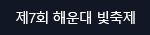
<style>
.page{position:relative;width:150px;height:35px;background:#111725}
.page>*{position:absolute;margin:0}
.t1{font:14px "MalgunGothic";letter-spacing:-0.06em;color:#ffffff}
</style>
<div class="page">
<p class="t1" style="left:16px;top:11px;width:119px;height:13px">제7회 해운대 빛축제</p>
</div>
